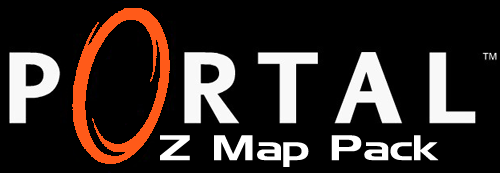
<style>
.page{position:relative;width:500px;height:173px;background:#000000}
.page>*{position:absolute;margin:0}
.t1{font:31.5px "HamiltonSteel";color:#ffffff;scale:1.33 1}
</style>
<div class="page">
<p class="t1" style="left:160px;top:135px;width:279px;height:32px">Z Map Pack</p>
</div>
